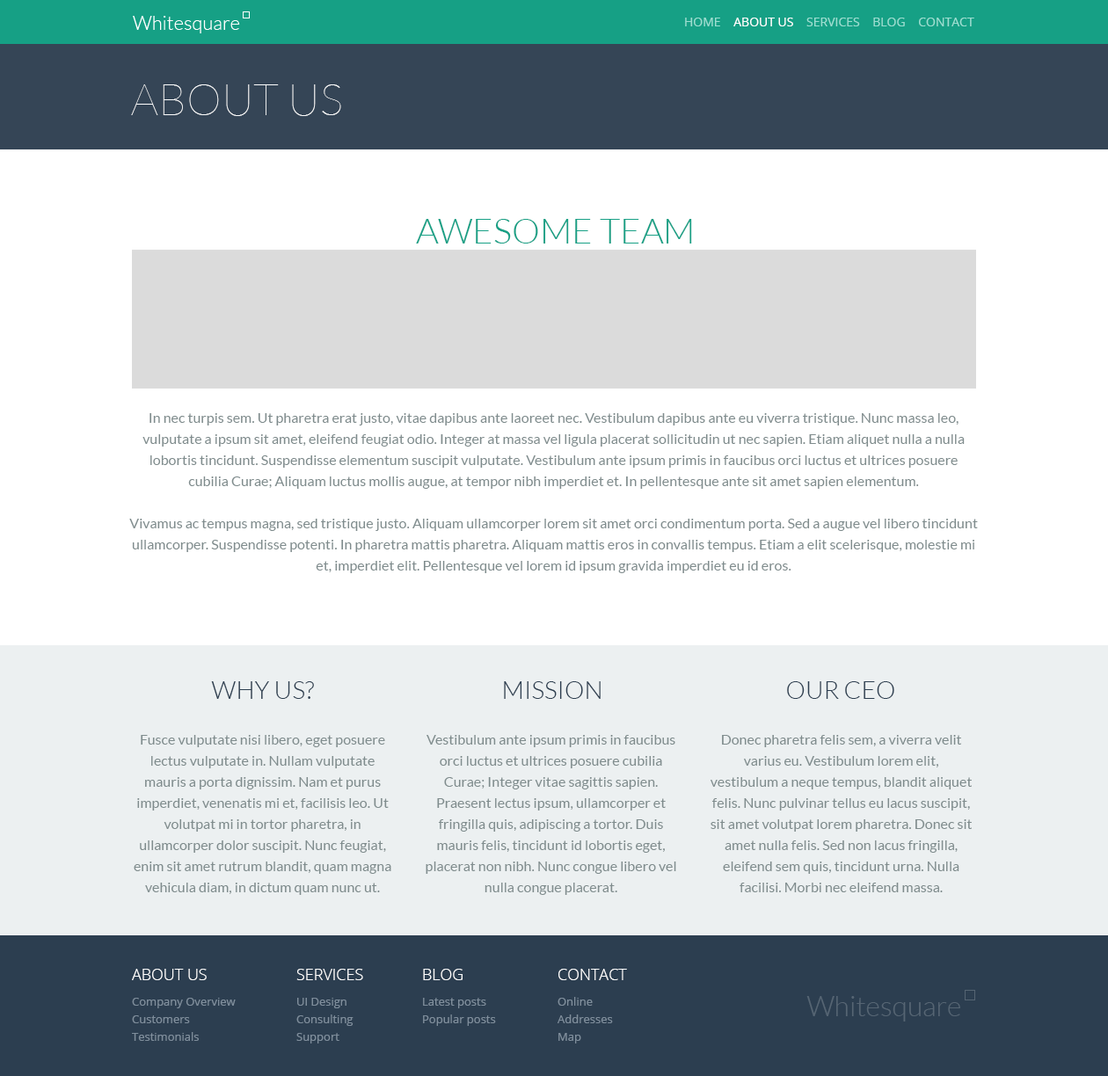
<style>
.page{position:relative;width:1108px;height:1076px;background:#ffffff}
.page>*{position:absolute;margin:0}
.t1{font:12.3px "OpenSans";color:#9bded1;text-transform:uppercase}
.t2{font:12.3px "OpenSans";color:#ffffff;text-transform:uppercase}
.t3{font:44px "Lato-Hairline";color:#ffffff;text-transform:uppercase}
.t4{font:35.2px "Lato-Light";color:#16a085;text-transform:uppercase}
.t5{font:14.1px/21.1px "Lato-Regular";color:#7f8c8d}
.t6{font:24.6px "Lato-Light";color:#2c3e50;text-transform:uppercase}
.t7{font:15.8px "OpenSans-Light";color:#ffffff;text-transform:uppercase}
.t8{font:11.4px/17.6px "OpenSans";color:#7f8e9c}
</style>
<div class="page">
<p class="t1" style="left:685px;top:18px;width:289px;height:8px">home    <span class="t2">about us</span>    services    blog    contact</p>
<p class="t3" style="left:131px;top:84px;width:210px;height:32px">About us</p>
<p class="t4" style="left:416px;top:219px;width:276px;height:25px">Awesome team</p>
<p class="t5" style="left:129px;top:413px;width:849px;height:160px;text-align:center">In nec turpis sem. Ut pharetra erat justo, vitae dapibus ante laoreet nec. Vestibulum dapibus ante eu viverra tristique. Nunc massa leo, vulputate a ipsum sit amet, eleifend feugiat odio. Integer at massa vel ligula placerat sollicitudin ut nec sapien. Etiam aliquet nulla a nulla lobortis tincidunt. Suspendisse elementum suscipit vulputate. Vestibulum ante ipsum primis in faucibus orci luctus et ultrices posuere cubilia Curae; Aliquam luctus mollis augue, at tempor nibh imperdiet et. In pellentesque ante sit amet sapien elementum.<br><br>Vivamus ac tempus magna, sed tristique justo. Aliquam ullamcorper lorem sit amet orci condimentum porta. Sed a augue vel libero tincidunt ullamcorper. Suspendisse potenti. In pharetra mattis pharetra. Aliquam mattis eros in convallis tempus. Etiam a elit scelerisque, molestie mi et, imperdiet elit. Pellentesque vel lorem id ipsum gravida imperdiet eu id eros.</p>
<p class="t6" style="left:211px;top:681px;width:103px;height:18px">Why us?</p>
<p class="t6" style="left:504px;top:681px;width:97px;height:18px">Mission</p>
<p class="t6" style="left:787px;top:681px;width:107px;height:18px">our ceo</p>
<p class="t5" style="left:134px;top:735px;width:257px;height:160px;text-align:center">Fusce vulputate nisi libero, eget posuere lectus vulputate in. Nullam vulputate mauris a porta dignissim. Nam et purus imperdiet, venenatis mi et, facilisis leo. Ut volutpat mi in tortor pharetra, in ullamcorper dolor suscipit. Nunc feugiat, enim sit amet rutrum blandit, quam magna vehicula diam, in dictum quam nunc ut.</p>
<p class="t5" style="left:426px;top:735px;width:250px;height:160px;text-align:center">Vestibulum ante ipsum primis in faucibus orci luctus et ultrices posuere cubilia Curae; Integer vitae sagittis sapien. Praesent lectus ipsum, ullamcorper et fringilla quis, adipiscing a tortor. Duis mauris felis, tincidunt id lobortis eget, placerat non nibh. Nunc congue libero vel nulla congue placerat.</p>
<p class="t5" style="left:710px;top:735px;width:262px;height:157px;text-align:center">Donec pharetra felis sem, a viverra velit varius eu. Vestibulum lorem elit, vestibulum a neque tempus, blandit aliquet felis. Nunc pulvinar tellus eu lacus suscipit, sit amet volutpat lorem pharetra. Donec sit amet nulla felis. Sed non lacus fringilla, eleifend sem quis, tincidunt urna. Nulla facilisi. Morbi nec eleifend massa.</p>
<p class="t7" style="left:132px;top:969px;width:75px;height:11px">about us</p>
<p class="t7" style="left:296px;top:969px;width:67px;height:11px">Services</p>
<p class="t7" style="left:423px;top:969px;width:40px;height:11px">Blog</p>
<p class="t7" style="left:558px;top:969px;width:69px;height:11px">Contact</p>
<p class="t8" style="left:132px;top:998px;width:104px;height:43px">Company Overview<br>Customers<br>Testimonials</p>
<p class="t8" style="left:296px;top:998px;width:57px;height:46px">UI Design<br>Consulting<br>Support</p>
<p class="t8" style="left:423px;top:998px;width:73px;height:28px">Latest posts<br>Popular posts</p>
<p class="t8" style="left:557px;top:997px;width:56px;height:47px">Online<br>Addresses<br>Map</p>
</div>
